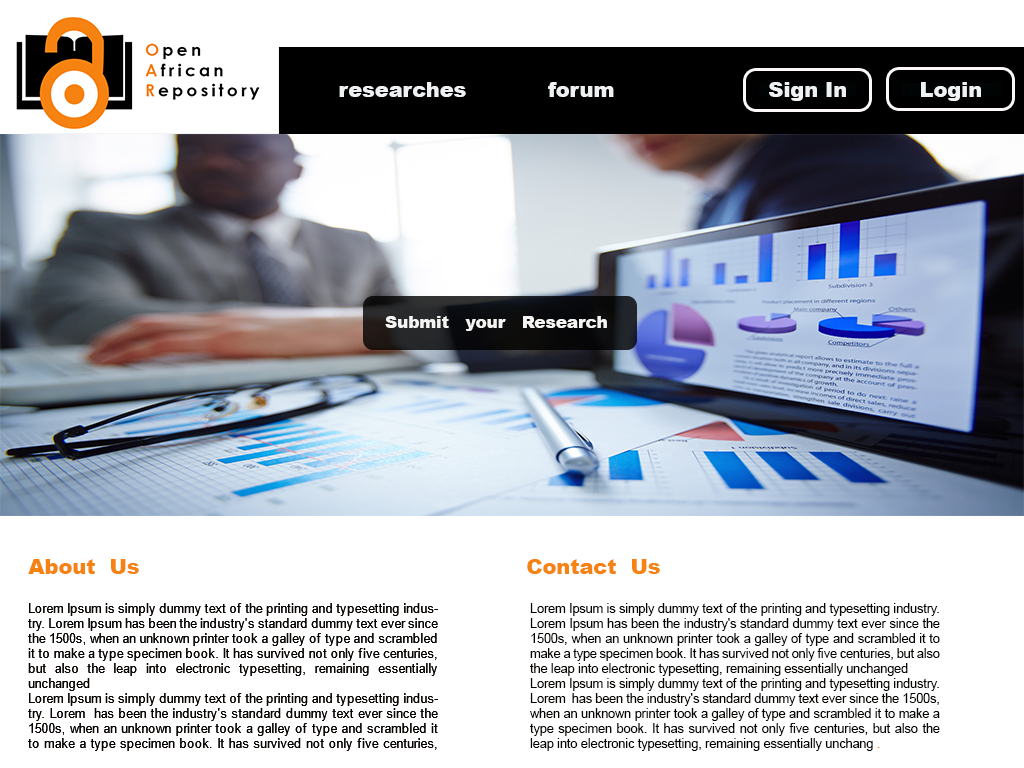
<style>
.page{position:relative;width:1024px;height:768px;background:#ffffff}
.page>*{position:absolute;margin:0}
.t1{font:20.8px "Arial-Black";color:#f0f1f2}
.t2{font:16.7px "Arial-Black";color:#f5f4f2}
.t3{font:20.8px "Arial-Black";color:#f68212}
.t4{font:12.5px "ArialMT";color:#060301}
.t5{font:12.5px "ArialMT";color:#f68212}
</style>
<div class="page">
<p class="t1" style="left:339px;top:82px;width:127px;height:15px">researches</p>
<p class="t1" style="left:548px;top:82px;width:66px;height:15px">forum</p>
<p class="t1" style="left:769px;top:82px;width:77px;height:19px">Sign In</p>
<p class="t1" style="left:921px;top:82px;width:60px;height:19px">Login</p>
<p class="t2" style="left:385px;top:316px;width:222px;height:15px">Submit   your   Research</p>
<p class="t3" style="left:28px;top:559px;width:111px;height:15px">About  Us</p>
<p class="t3" style="left:527px;top:559px;width:133px;height:15px">Contact  Us</p>
<p class="t4" style="left:28px;top:603px;width:410px;height:148px;text-align:justify">Lorem Ipsum is simply dummy text of the printing and typesetting industry. Lorem Ipsum has been the industry's standard dummy text ever since the 1500s, when an unknown printer took a galley of type and scrambled it to make a type specimen book. It has survived not only five centuries, but also the leap into electronic typesetting, remaining essentially unchanged<br>Lorem Ipsum is simply dummy text of the printing and typesetting industry. Lorem  has been the industry's standard dummy text ever since the 1500s, when an unknown printer took a galley of type and scrambled it to make a type specimen book. It has survived not only five centuries, but also the leap into electronic typesetting, remaining essentially unchang<span class="t5"> .</span></p>
<p class="t4" style="left:530px;top:603px;width:410px;height:148px;text-align:justify">Lorem Ipsum is simply dummy text of the printing and typesetting industry. Lorem Ipsum has been the industry's standard dummy text ever since the 1500s, when an unknown printer took a galley of type and scrambled it to make a type specimen book. It has survived not only five centuries, but also the leap into electronic typesetting, remaining essentially unchanged<br>Lorem Ipsum is simply dummy text of the printing and typesetting industry. Lorem  has been the industry's standard dummy text ever since the 1500s, when an unknown printer took a galley of type and scrambled it to make a type specimen book. It has survived not only five centuries, but also the leap into electronic typesetting, remaining essentially unchang<span class="t5"> .</span></p>
</div>
